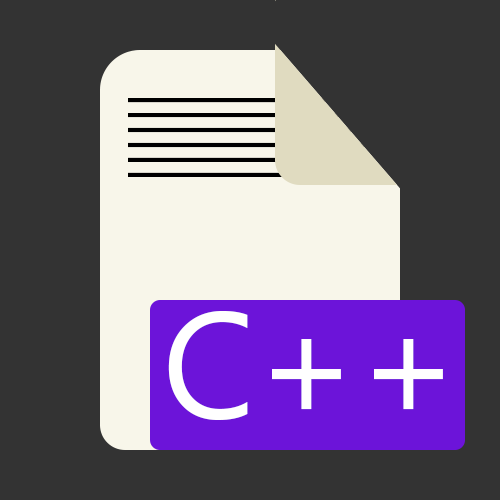
<style>
.page{position:relative;width:500px;height:500px;background:#333333}
.page>*{position:absolute;margin:0}
.t1{font:150px "MicrosoftTaiLe";color:#ffffff}
</style>
<div class="page">
<p class="t1" style="left:168px;top:311px;width:275px;height:109px">C++</p>
</div>
